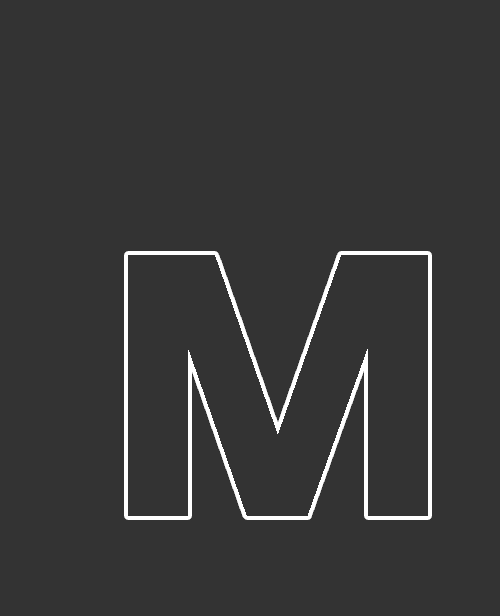
<style>
.page{position:relative;width:500px;height:616px;background:#333333}
.page>*{position:absolute;margin:0}
.t1{font:500px "Arial-BoldMT";color:#333333}
</style>
<div class="page">
<p class="t1" style="left:128px;top:255px;width:300px;height:261px">м</p>
</div>
